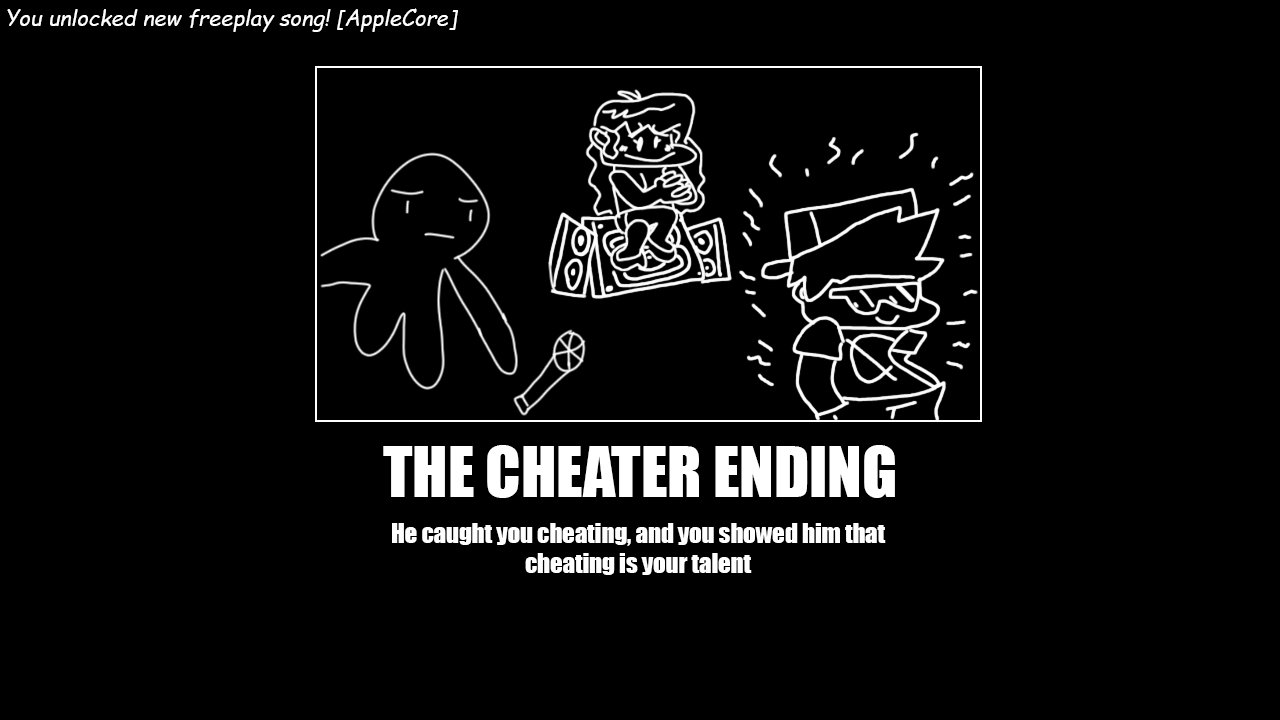
<style>
.page{position:relative;width:1280px;height:720px;background:#000000}
.page>*{position:absolute;margin:0}
.t1{font:21.8px "ComicSansMS-Italic";color:#ffffff}
.t2{font:63.7px "Impact";color:#ffffff}
.t3{font:24.6px "Impact";color:#ffffff}
</style>
<div class="page">
<p class="t1" style="left:7px;top:8px;width:451px;height:24px">You unlocked new freeplay song! [AppleCore]</p>
<p class="t2" style="left:383px;top:445px;width:512px;height:53px">THE CHEATER ENDING</p>
<p class="t3" style="left:392px;top:523px;width:494px;height:52px;text-align:center">He caught you cheating, and you showed him that<br>cheating is your talent</p>
</div>
